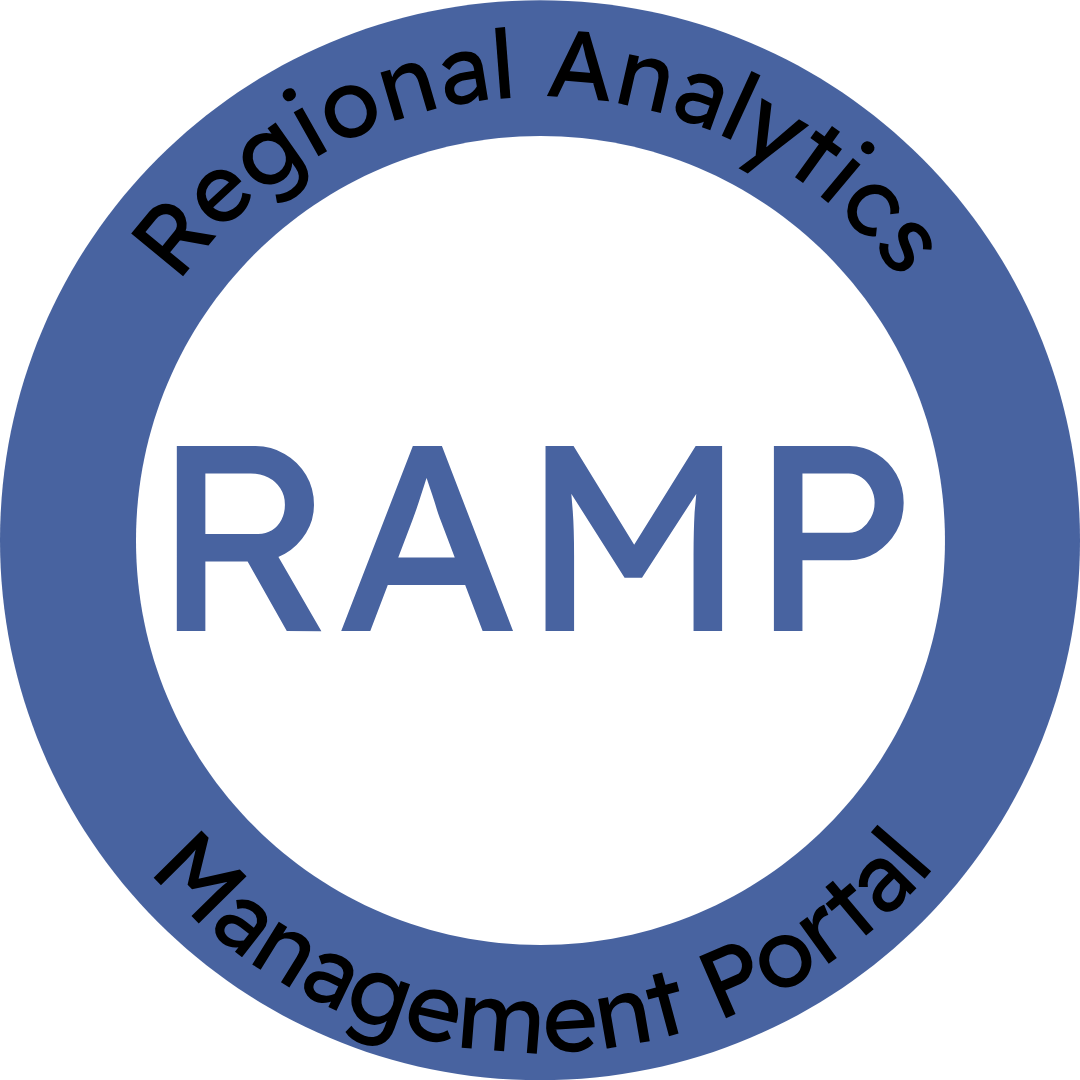
<style>
.page{position:relative;width:1080px;height:1080px;background:#ffffff}
.page>*{position:absolute;margin:0}
.t1{font:96px "ReadexPro-Regular";color:#000000}
.t2{font:264.3px "ReadexPro-Regular";color:#4863a0}
</style>
<div class="page">
<p class="t1" style="left:131px;top:27px;width:802px;height:250px;text-align:center">Regional Analytics</p>
<p class="t2" style="left:176px;top:446px;width:728px;height:186px">RAMP</p>
<p class="t1" style="left:153px;top:824px;width:779px;height:230px;text-align:center">Management Portal</p>
</div>
